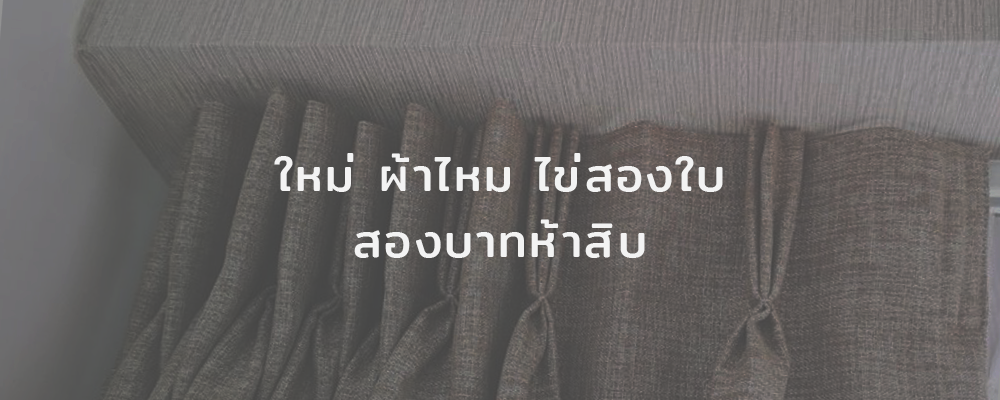
<style>
.page{position:relative;width:1000px;height:400px}
.page>*{position:absolute;margin:0}
.t1{font:46.7px/66.7px "Mitr-Regular";letter-spacing:0.05em;color:#f3f3f3}
</style>
<div class="page">
<p class="t1" style="left:274px;top:153px;width:449px;height:105px;text-align:center">ใหม่ ผ้าไหม ไข่สองใบ<br>สองบาทห้าสิบ</p>
</div>
